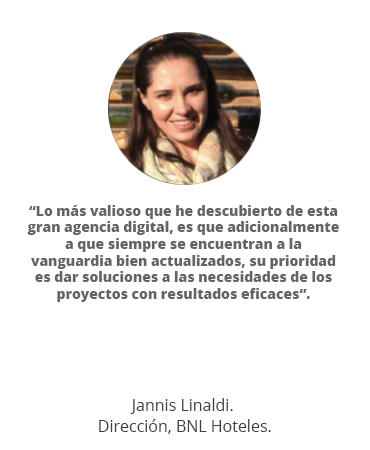
<style>
.page{position:relative;width:370px;height:450px;background:#ffffff}
.page>*{position:absolute;margin:0}
.t1{font:13.9px "OpenSans-Extrabold";color:#636466}
</style>
<div class="page">
<p class="t1" style="left:27px;top:205px;width:312px;height:97px;text-align:center">“Lo más valioso que he descubierto de esta gran agencia digital, es que adicionalmente a que siempre se encuentran a la vanguardia bien actualizados, su prioridad es dar soluciones a las necesidades de los proyectos con resultados eficaces”.</p>
</div>
